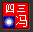
<style>
.page{position:relative;width:33px;height:32px;background:#f20000}
.page>*{position:absolute;margin:0}
.t1{font:10.4px "SimSun";color:#ffffff}
.t2{font:11.7px "SimSun";color:#ffffff}
</style>
<div class="page">
<p class="t1" style="left:6px;top:4px;width:19px;height:9px">四三</p>
<p class="t2" style="left:16px;top:15px;width:11px;height:12px">冯</p>
</div>
